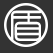
<style>
.page{position:relative;width:53px;height:53px;background:#333333}
.page>*{position:absolute;margin:0}
.t1{font:33.3px "¾­µä·±·½×­ Regular";color:#ffffff}
</style>
<div class="page">
<p class="t1" style="left:11px;top:10px;width:30px;height:31px">盾</p>
</div>
